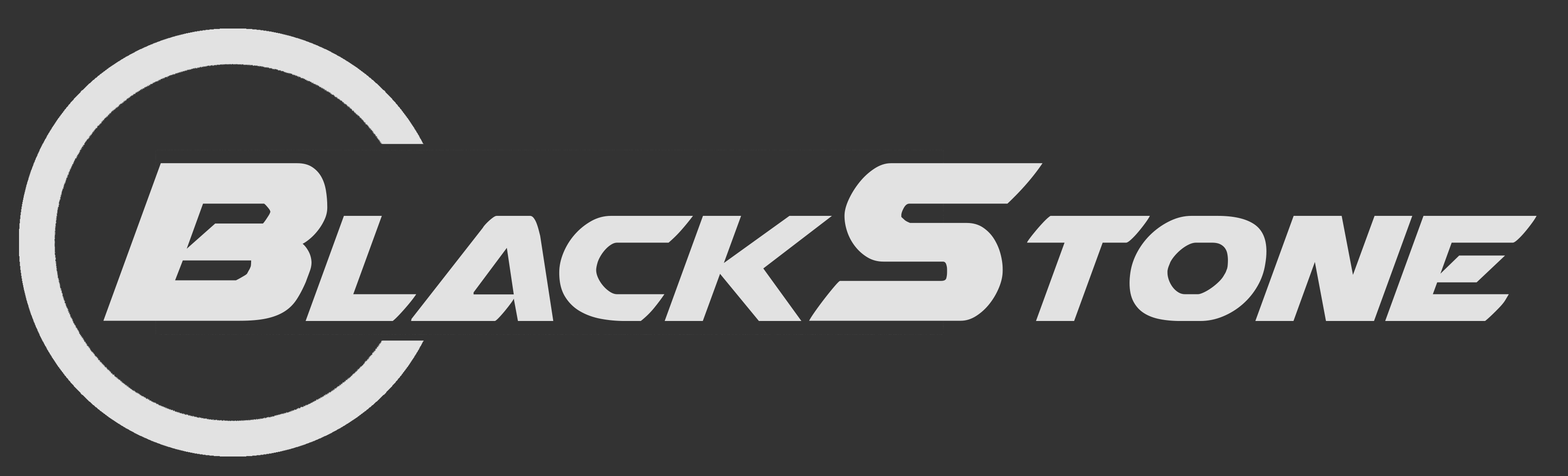
<style>
.page{position:relative;width:1568px;height:476px;background:#333333}
.page>*{position:absolute;margin:0}
.t1{font:198.2px "Airstrike";color:#e2e2e2}
.t2{font:297.2px "Airstrike";color:#e2e2e2}
</style>
<div class="page">
<p class="t1" style="left:103px;top:163px;width:1434px;height:158px"><span class="t2">B</span>LACK<span class="t2">S</span>TONE</p>
</div>
